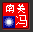
<style>
.page{position:relative;width:33px;height:32px;background:#f20000}
.page>*{position:absolute;margin:0}
.t1{font:10.4px "SimSun";color:#ffffff}
.t2{font:11.7px "SimSun";color:#ffffff}
</style>
<div class="page">
<p class="t1" style="left:6px;top:4px;width:19px;height:9px">南美</p>
<p class="t2" style="left:16px;top:15px;width:11px;height:12px">冯</p>
</div>
